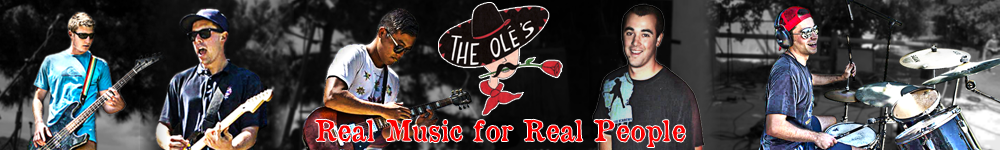
<style>
.page{position:relative;width:1000px;height:150px}
.page>*{position:absolute;margin:0}
.t1{font:28px "OldNewspaperTypes";color:#fa0000}
</style>
<div class="page">
<p class="t1" style="left:315px;top:119px;width:371px;height:28px">Real Music for Real People</p>
</div>
